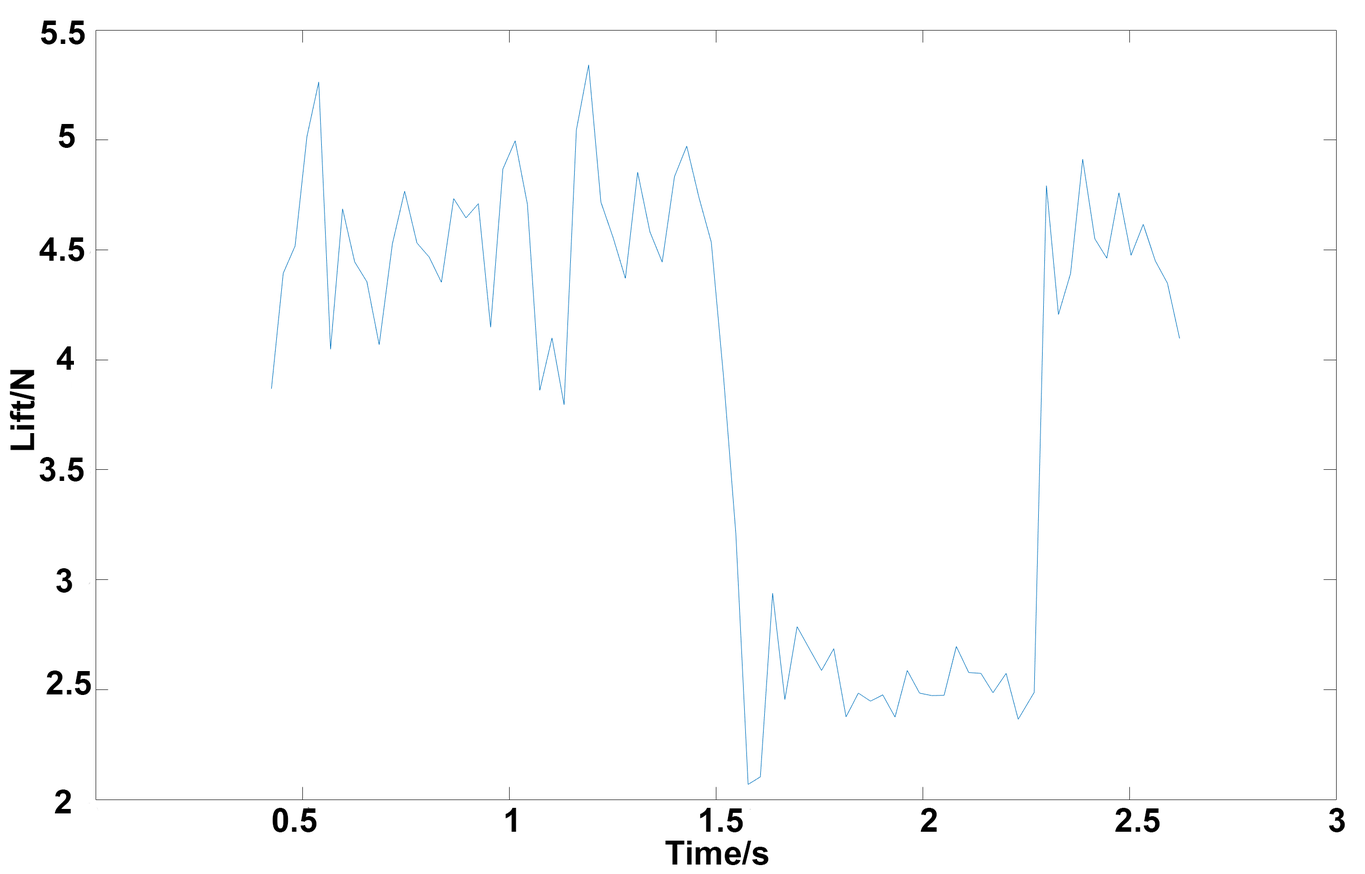
<style>
.page{position:relative;width:1365px;height:874px;background:#ffffff}
.page>*{position:absolute;margin:0}
.t1{font:33.5px "Arial-BoldMT";color:#000000}
.t2{font:33.3px "Arial-BoldMT";color:#000000}
.t3{font:33.4px "Arial-BoldMT";color:#000000}
</style>
<div class="page">
<p class="t1" style="left:41px;top:21px;width:44px;height:23px">5.5</p>
<p class="t1" style="left:58px;top:124px;width:17px;height:24px">5</p>
<p class="t2" style="left:39px;top:237px;width:45px;height:24px">4.5</p>
<p class="t1" style="left:57px;top:346px;width:17px;height:24px">4</p>
<p class="t3" style="left:9px;top:370px;width:26px;height:80px;rotate:-90deg">Lift/N</p>
<p class="t2" style="left:39px;top:457px;width:45px;height:24px">3.5</p>
<p class="t1" style="left:56px;top:568px;width:16px;height:24px">3</p>
<p class="t2" style="left:46px;top:670px;width:45px;height:25px">2.5</p>
<p class="t2" style="left:54px;top:789px;width:17px;height:24px">2</p>
<p class="t2" style="left:272px;top:807px;width:1073px;height:25px">0.5                    1                   1.5                   2                   2.5                  3</p>
<p class="t2" style="left:665px;top:840px;width:104px;height:25px">Time/s</p>
</div>
